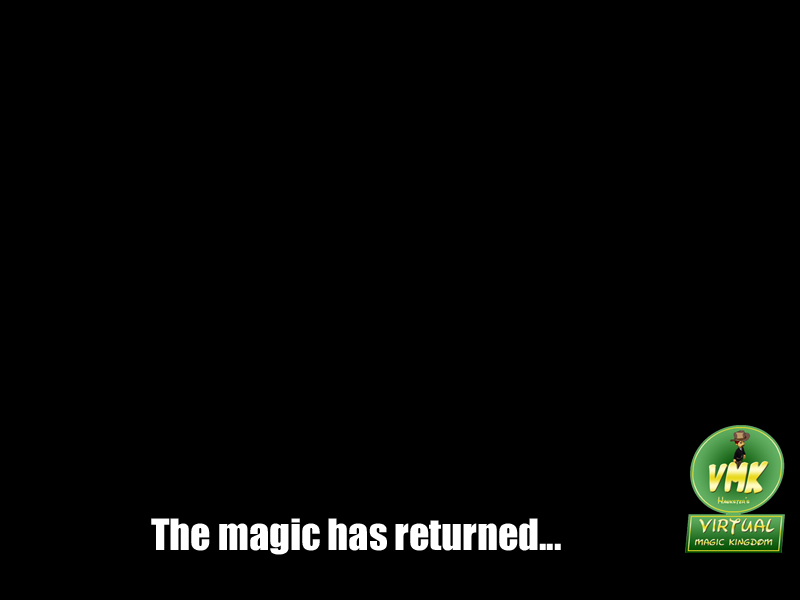
<style>
.page{position:relative;width:800px;height:600px;background:#000000}
.page>*{position:absolute;margin:0}
.t1{font:40px "Impact";color:#ffffff}
</style>
<div class="page">
<p class="t1" style="left:151px;top:518px;width:410px;height:37px">The magic has returned...</p>
</div>
